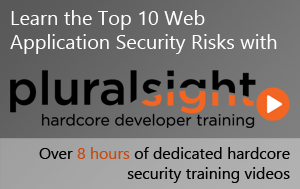
<style>
.page{position:relative;width:300px;height:189px}
.page>*{position:absolute;margin:0}
.t1{font:20px "SegoeUI";color:#ffffff}
.t2{font:16px "SegoeUI";color:#000000}
.t3{font:16px "SegoeUI";color:#c8490d}
</style>
<div class="page">
<p class="t1" style="left:10px;top:10px;width:267px;height:44px">Learn the Top 10 Web Application Security Risks with</p>
<p class="t2" style="left:39px;top:147px;width:251px;height:36px;text-align:right">Over <span class="t3">8 hours</span> of dedicated hardcore security training videos</p>
</div>
